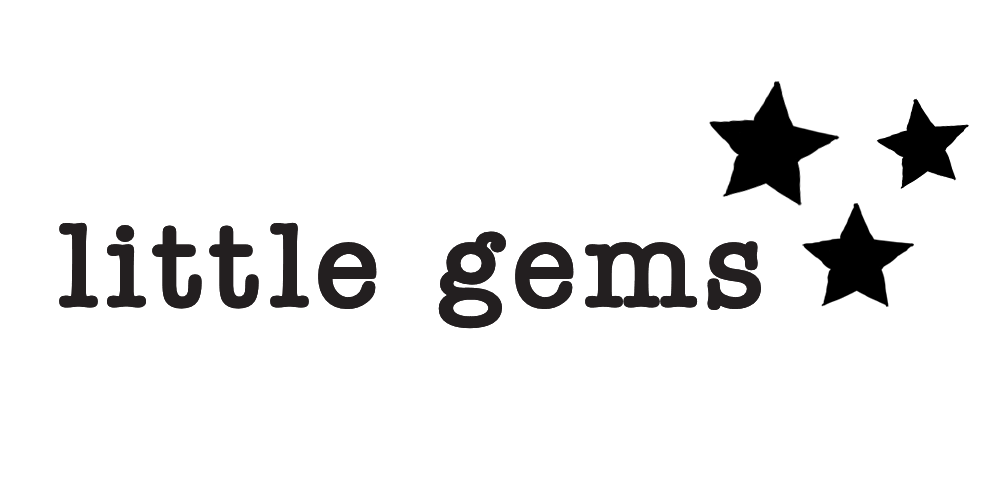
<style>
.page{position:relative;width:1000px;height:500px;background:#ffffff}
.page>*{position:absolute;margin:0}
.t1{font:124.5px "AmericanTypewriter-Semibold";letter-spacing:0.2em;color:#231f20}
</style>
<div class="page">
<p class="t1" style="left:59px;top:222px;width:702px;height:107px">little gems</p>
</div>
